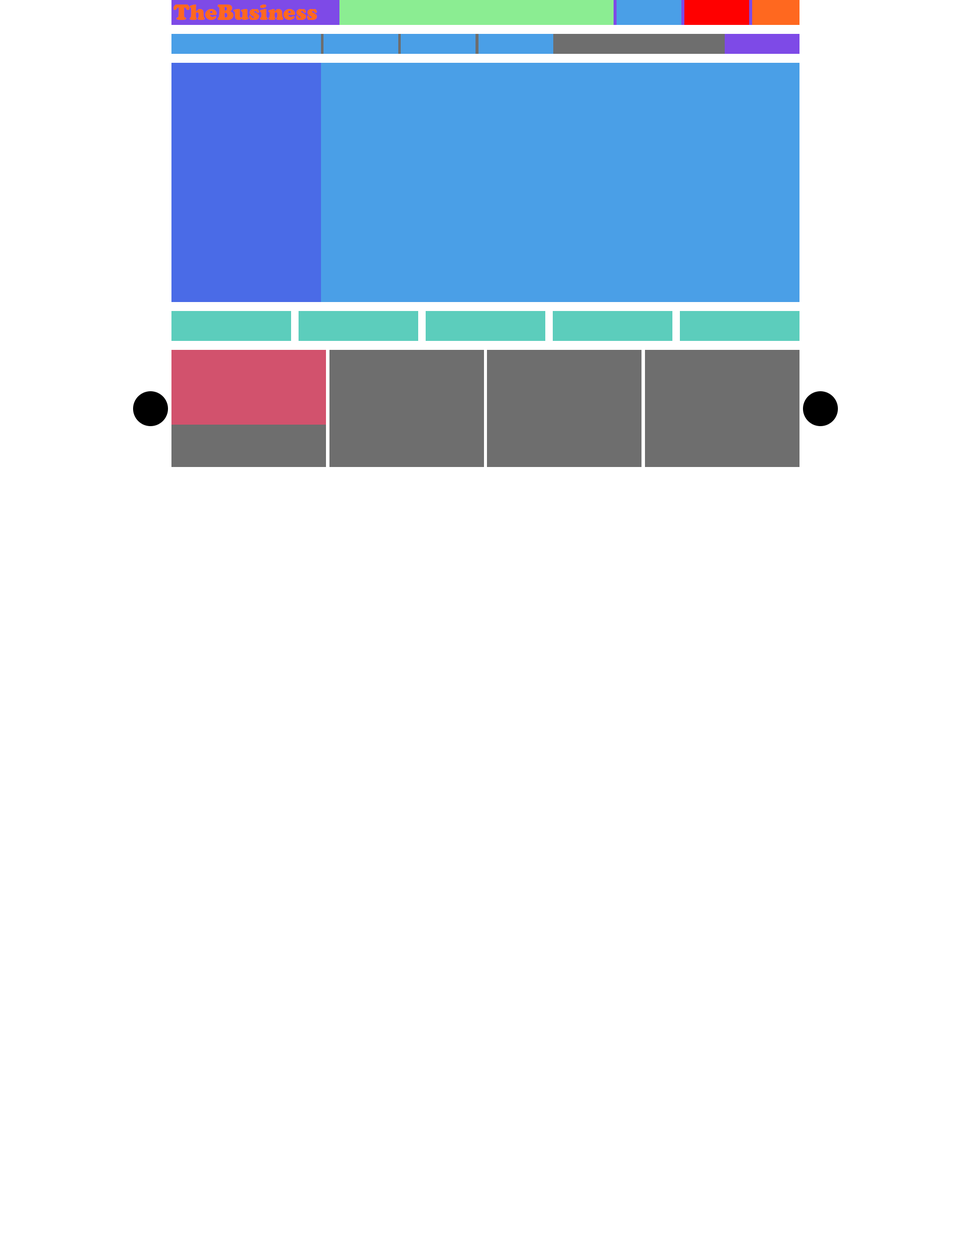
<style>
.page{position:relative;width:957px;height:1246px;background:#ffffff}
.page>*{position:absolute;margin:0}
.t1{font:22.8px "CooperBlack";color:#ff681f}
</style>
<div class="page">
<p class="t1" style="left:173px;top:4px;width:144px;height:16px">TheBusiness</p>
</div>
